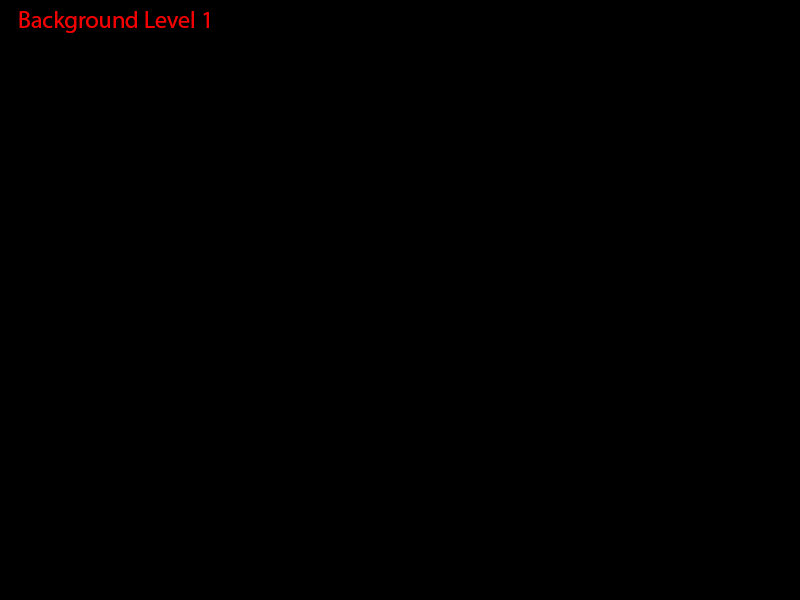
<style>
.page{position:relative;width:800px;height:600px;background:#000000}
.page>*{position:absolute;margin:0}
.t1{font:12px "MyriadPro-Regular";color:#f40101}
</style>
<div class="page">
<p class="t1" style="left:19px;top:11px;width:190px;height:22px">Background Level 1</p>
</div>
